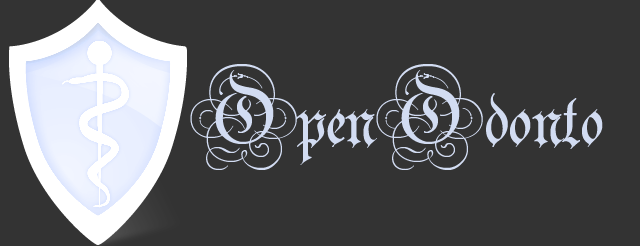
<style>
.page{position:relative;width:640px;height:246px;background:#333333}
.page>*{position:absolute;margin:0}
.t1{font:132px "Parchment-Regular";color:#d2dcf2;scale:0.95 1}
</style>
<div class="page">
<p class="t1" style="left:190px;top:64px;width:413px;height:106px">OpenOdonto</p>
</div>
